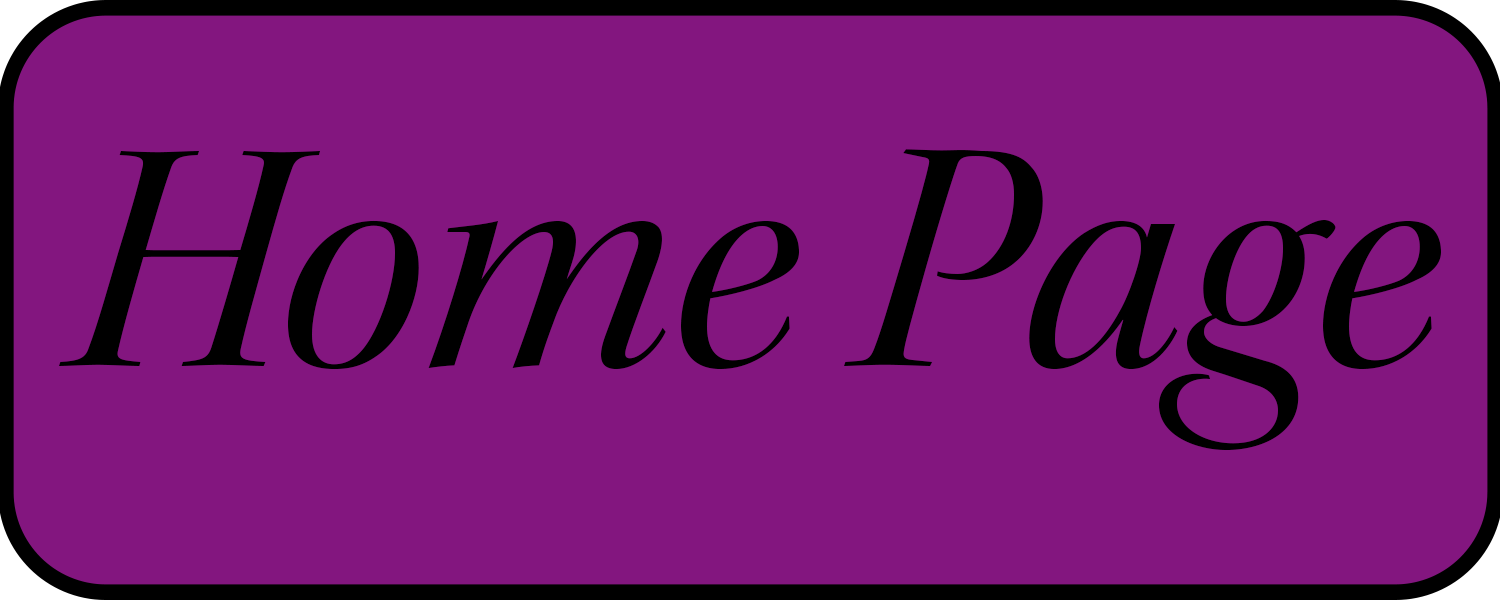
<style>
.page{position:relative;width:1500px;height:600px;background:#83167f}
.page>*{position:absolute;margin:0}
.t1{font:333.3px "KeplerStd-ItDisp";color:#000000}
</style>
<div class="page">
<p class="t1" style="left:59px;top:149px;width:1382px;height:302px">Home Page</p>
</div>
